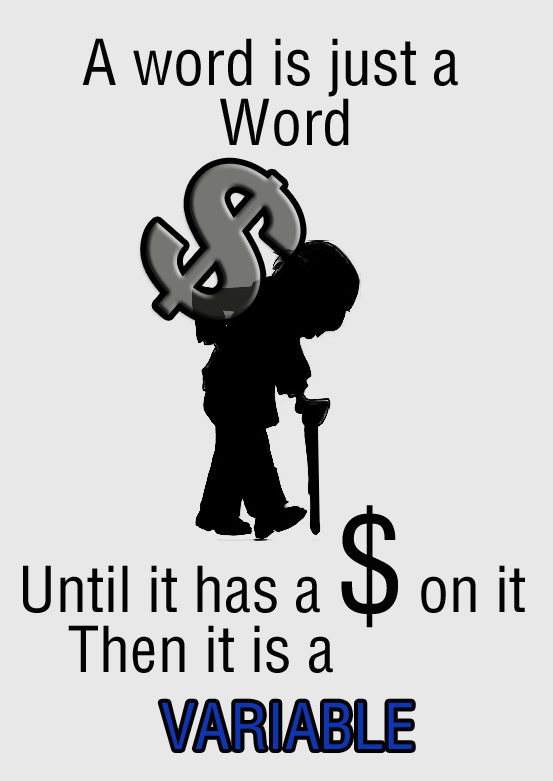
<style>
.page{position:relative;width:553px;height:781px;background:#e8e8e8}
.page>*{position:absolute;margin:0}
.t1{font:61.8px "HelveticaLTStd-Cond";color:#030303}
.t2{font:131.1px "HelveticaLTStd-Cond";color:#030303}
.t3{font:61.8px "HelveticaLTStd-Cond";color:#1035ae}
</style>
<div class="page">
<p class="t1" style="left:82px;top:38px;width:376px;height:59px">A word is just a</p>
<p class="t1" style="left:220px;top:98px;width:129px;height:48px">Word</p>
<p class="t1" style="left:23px;top:505px;width:502px;height:123px">Until it has a <span class="t2">$</span> on it</p>
<p class="t1" style="left:68px;top:625px;width:265px;height:48px">Then it is a</p>
<p class="t3" style="left:161px;top:702px;width:251px;height:47px">VARIABLE</p>
</div>
